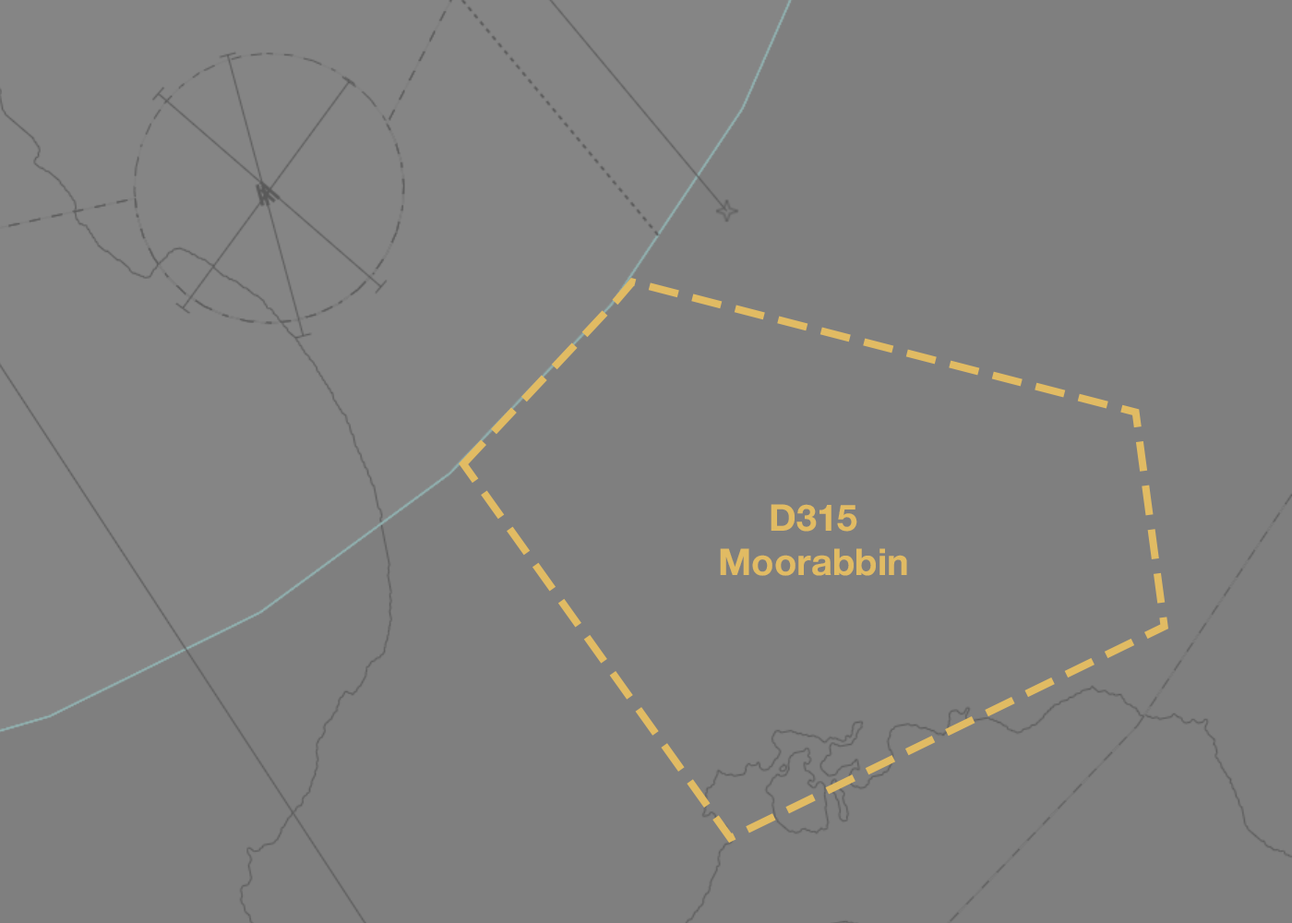
<style>
.page{position:relative;width:1292px;height:923px;background:#7f7f7f}
.page>*{position:absolute;margin:0}
.t1{font:36.9px "HelveticaNeue-Bold";color:#e1bb63}
</style>
<div class="page">
<p class="t1" style="left:720px;top:504px;width:187px;height:72px;text-align:center">D315<br>Moorabbin</p>
</div>
